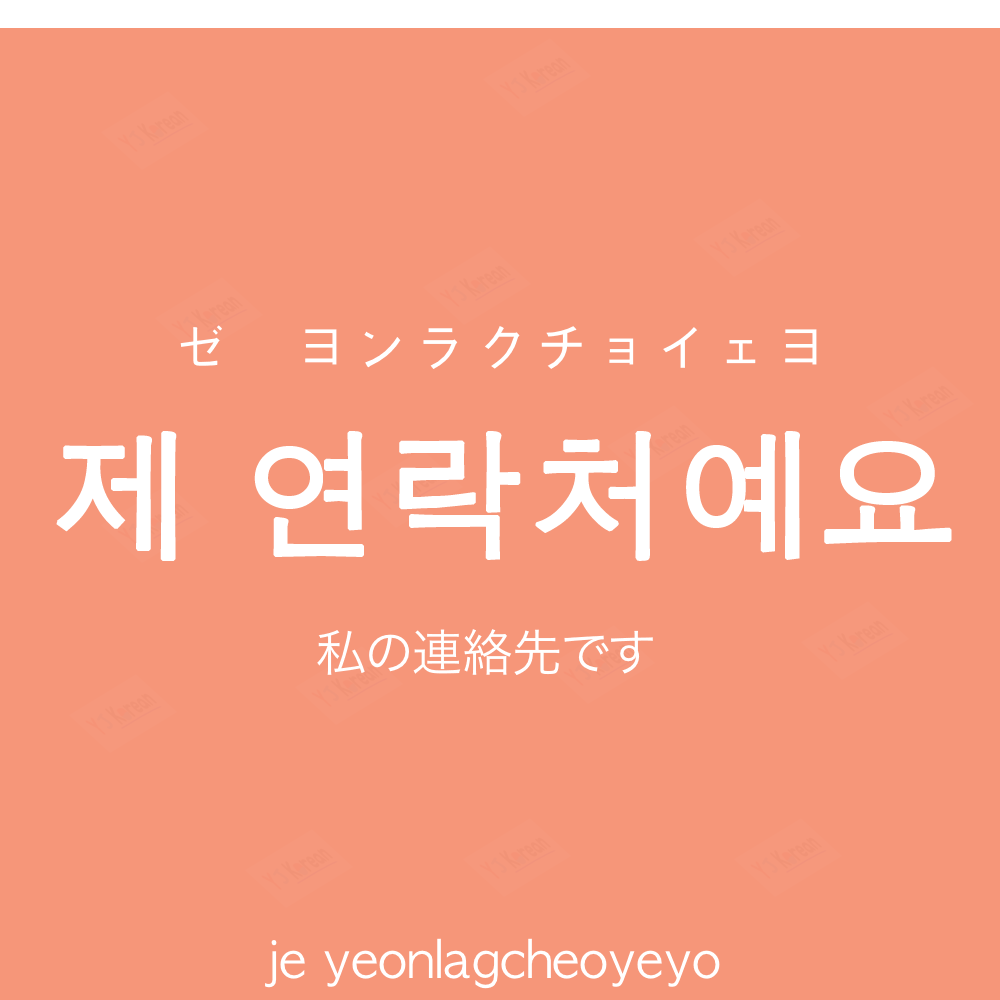
<style>
.page{position:relative;width:1000px;height:1000px;background:#f69679}
.page>*{position:absolute;margin:0}
.t1{font:60px "AppleGothic";color:#ffffff}
.t2{font:140px "AppleGothic";color:#ffffff;font-weight:bold}
.t3{font:50px "HiraKakuProN-W3";color:#ffffff}
.t4{font:50px "AppleGothic";color:#ffffff}
</style>
<div class="page">
<p class="t1" style="left:180px;top:325px;width:637px;height:44px">ゼ　ヨンラクチョイェヨ</p>
<p class="t2" style="left:56px;top:431px;width:896px;height:130px">제 연락처예요</p>
<p class="t3" style="left:317px;top:629px;width:336px;height:46px">私の連絡先です</p>
<p class="t4" style="left:265px;top:938px;width:455px;height:51px">je yeonlagcheoyeyo</p>
</div>
